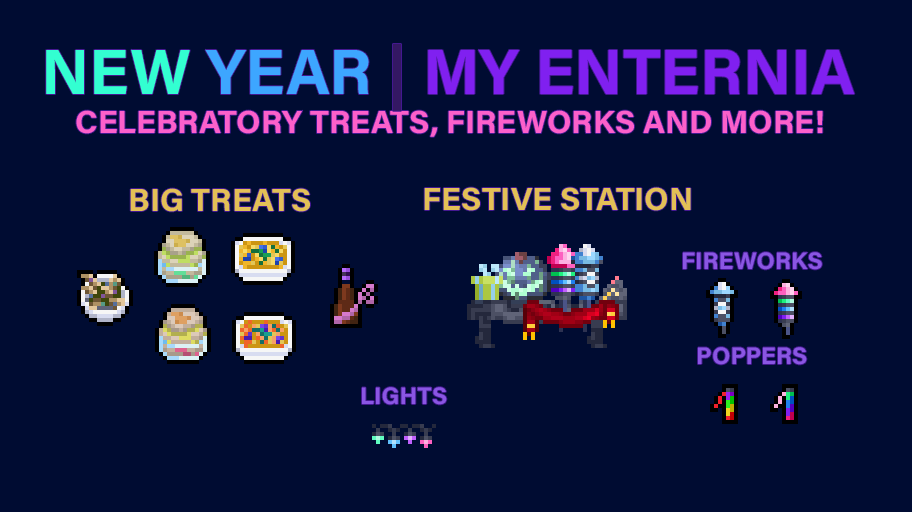
<style>
.page{position:relative;width:912px;height:512px;background:#000c32}
.page>*{position:absolute;margin:0}
.t1{font:64px "AcuminConcept-Bold";color:#8020f0}
.t2{font:64px "AcuminConcept-Bold";color:#33ffd1}
.t3{font:64px "AcuminConcept-Bold";color:#3da6ff}
.t4{font:64px "AcuminConcept-Bold";color:#341863}
.t5{font:32px "AcuminConcept-Bold";color:#fc60ca}
.t6{font:32px "AcuminConcept-Bold";color:#e3c056}
.t7{font:24px "AcuminConcept-Bold";color:#8a56e3}
</style>
<div class="page">
<p class="t1" style="left:46px;top:44px;width:809px;height:67px"><span class="t2">NEW </span><span class="t3">YEAR </span><span class="t4">| </span>MY ENTERNIA</p>
<p class="t5" style="left:76px;top:110px;width:747px;height:27px">CELEBRATORY TREATS, FIREWORKS AND MORE!</p>
<p class="t6" style="left:130px;top:188px;width:180px;height:24px">BIG TREATS</p>
<p class="t6" style="left:424px;top:187px;width:267px;height:24px">FESTIVE STATION</p>
<p class="t7" style="left:683px;top:252px;width:139px;height:18px">FIREWORKS</p>
<p class="t7" style="left:698px;top:347px;width:109px;height:18px">POPPERS</p>
<p class="t7" style="left:362px;top:387px;width:85px;height:18px">LIGHTS</p>
</div>
